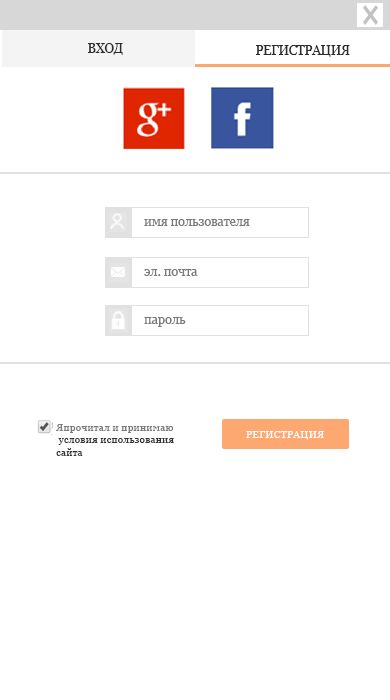
<style>
.page{position:relative;width:390px;height:700px;background:#ffffff}
.page>*{position:absolute;margin:0}
.t1{font:12.5px "Georgia";color:#2c2c2c}
.t2{font:14.9px "Georgia";color:#7b7b7b;scale:0.84 1}
.t3{font:10.4px "Georgia";color:#343434}
.t4{font:10.4px "Georgia";color:#7b7b7b}
.t5{font:10.4px "Georgia";color:#ffffff}
</style>
<div class="page">
<p class="t1" style="left:88px;top:43px;width:35px;height:12px">ВХОД</p>
<p class="t1" style="left:256px;top:45px;width:94px;height:12px">РЕГИСТРАЦИЯ</p>
<p class="t2" style="left:144px;top:219px;width:106px;height:7px">имя пользователя</p>
<p class="t2" style="left:144px;top:269px;width:54px;height:7px">эл. почта</p>
<p class="t2" style="left:144px;top:317px;width:42px;height:10px">пароль</p>
<p class="t3" style="left:56px;top:424px;width:118px;height:32px"><span class="t4">Япрочитал и принимаю<br></span> условия использования<br>сайта</p>
<p class="t5" style="left:246px;top:431px;width:78px;height:9px">РЕГИСТРАЦИЯ</p>
</div>
